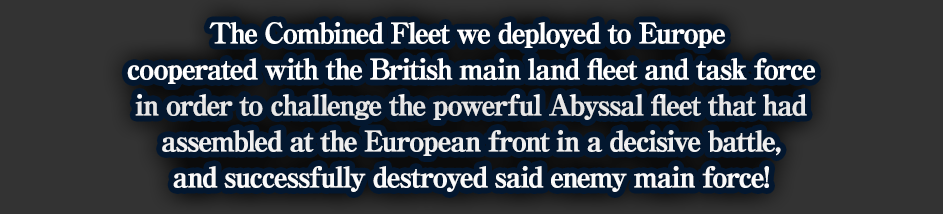
<style>
.page{position:relative;width:943px;height:214px;background:#333333}
.page>*{position:absolute;margin:0}
.t1{font:28px/36px "RyuminPro-ExBold";letter-spacing:-0.08em;color:#ffffff;font-weight:bold}
</style>
<div class="page">
<p class="t1" style="left:127px;top:22px;width:689px;height:170px;text-align:center">The Combined Fleet we deployed to Europe <br>cooperated with the British main land fleet and task force<br>in order to challenge the powerful Abyssal fleet that had<br>assembled at the European front in a decisive battle,<br>and successfully destroyed said enemy main force!</p>
</div>
